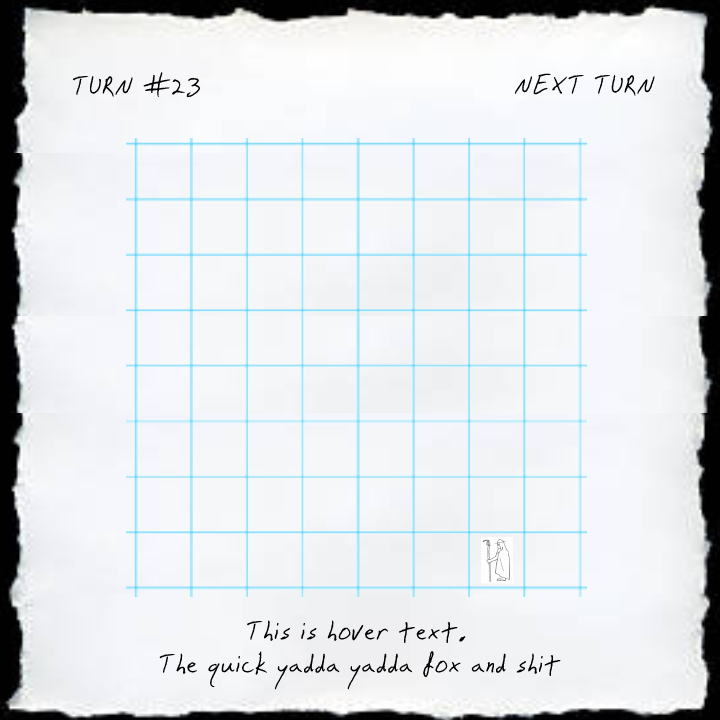
<style>
.page{position:relative;width:720px;height:720px}
.page>*{position:absolute;margin:0}
.t1{font:44px "Snake";color:#000000}
</style>
<div class="page">
<p class="t1" style="left:72px;top:72px;width:129px;height:26px">TURN #23</p>
<p class="t1" style="left:514px;top:73px;width:141px;height:23px">NEXT TURN</p>
<p class="t1" style="left:247px;top:620px;width:219px;height:24px">This is hover text.</p>
<p class="t1" style="left:159px;top:651px;width:402px;height:39px">The quick yadda yadda fox and shit</p>
</div>
